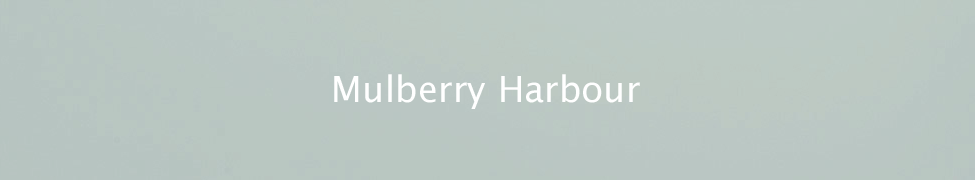
<style>
.page{position:relative;width:975px;height:180px}
.page>*{position:absolute;margin:0}
.t1{font:36px "LucidaSans";color:#ffffff}
</style>
<div class="page">
<p class="t1" style="left:334px;top:74px;width:306px;height:35px">Mulberry Harbour</p>
</div>
